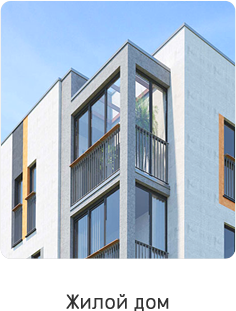
<style>
.page{position:relative;width:236px;height:311px}
.page>*{position:absolute;margin:0}
.t1{font:19.9px "Rubik-Light";color:#323232;font-weight:bold}
</style>
<div class="page">
<p class="t1" style="left:66px;top:294px;width:103px;height:17px">Жилой дом</p>
</div>
